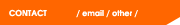
<style>
.page{position:relative;width:180px;height:25px;background:#ff6600}
.page>*{position:absolute;margin:0}
.t1{font:8px "Atlanta-Demi";color:#ffffff}
</style>
<div class="page">
<p class="t1" style="left:9px;top:9px;width:38px;height:8px">CONTACT</p>
<p class="t1" style="left:76px;top:10px;width:62px;height:8px">/ email / other /</p>
</div>
